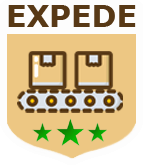
<style>
.page{position:relative;width:143px;height:166px;background:#edc783}
.page>*{position:absolute;margin:0}
.t1{font:30px "Verdana-Bold";color:#583916}
</style>
<div class="page">
<p class="t1" style="left:8px;top:5px;width:128px;height:22px">EXPEDE</p>
</div>
